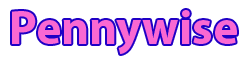
<style>
.page{position:relative;width:248px;height:64px;background:#ffffff}
.page>*{position:absolute;margin:0}
.t1{font:48px "MyriadPro-Bold";color:#fa68d2}
</style>
<div class="page">
<p class="t1" style="left:12px;top:10px;width:225px;height:44px">Pennywise</p>
</div>
